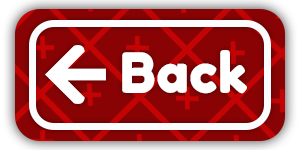
<style>
.page{position:relative;width:300px;height:150px;background:#890304}
.page>*{position:absolute;margin:0}
.t1{font:55.6px "ForkdokaOne-Regular";color:#ffffff}
</style>
<div class="page">
<p class="t1" style="left:122px;top:50px;width:125px;height:44px">Back</p>
</div>
